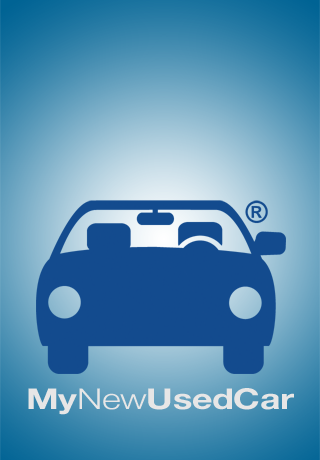
<style>
.page{position:relative;width:320px;height:460px}
.page>*{position:absolute;margin:0}
.t1{font:28.8px "HelveticaNeue-Bold";letter-spacing:-0.01em;color:#e7e6e6;scale:1.25 1}
.t2{font:28.8px "HelveticaNeue-Light";letter-spacing:-0.01em;color:#e7e6e6;scale:1.25 1}
</style>
<div class="page">
<p class="t1" style="left:28px;top:388px;width:266px;height:27px">My     <span class="t2">New</span>Used Car</p>
</div>
